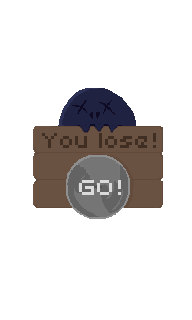
<style>
.page{position:relative;width:192px;height:320px;background:#ffffff}
.page>*{position:absolute;margin:0}
.t1{font:24px "Uni0553";color:#3f2e21}
.t2{font:24px "Uni0553";color:#dbdbdb}
</style>
<div class="page">
<p class="t1" style="left:42px;top:133px;width:114px;height:15px">You lose!</p>
<p class="t2" style="left:79px;top:180px;width:42px;height:15px">GO!</p>
</div>
